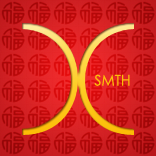
<style>
.page{position:relative;width:156px;height:156px}
.page>*{position:absolute;margin:0}
.t1{font:14.7px "STXihei";color:#fcbe08}
</style>
<div class="page">
<p class="t1" style="left:94px;top:74px;width:36px;height:12px">SMTH</p>
</div>
